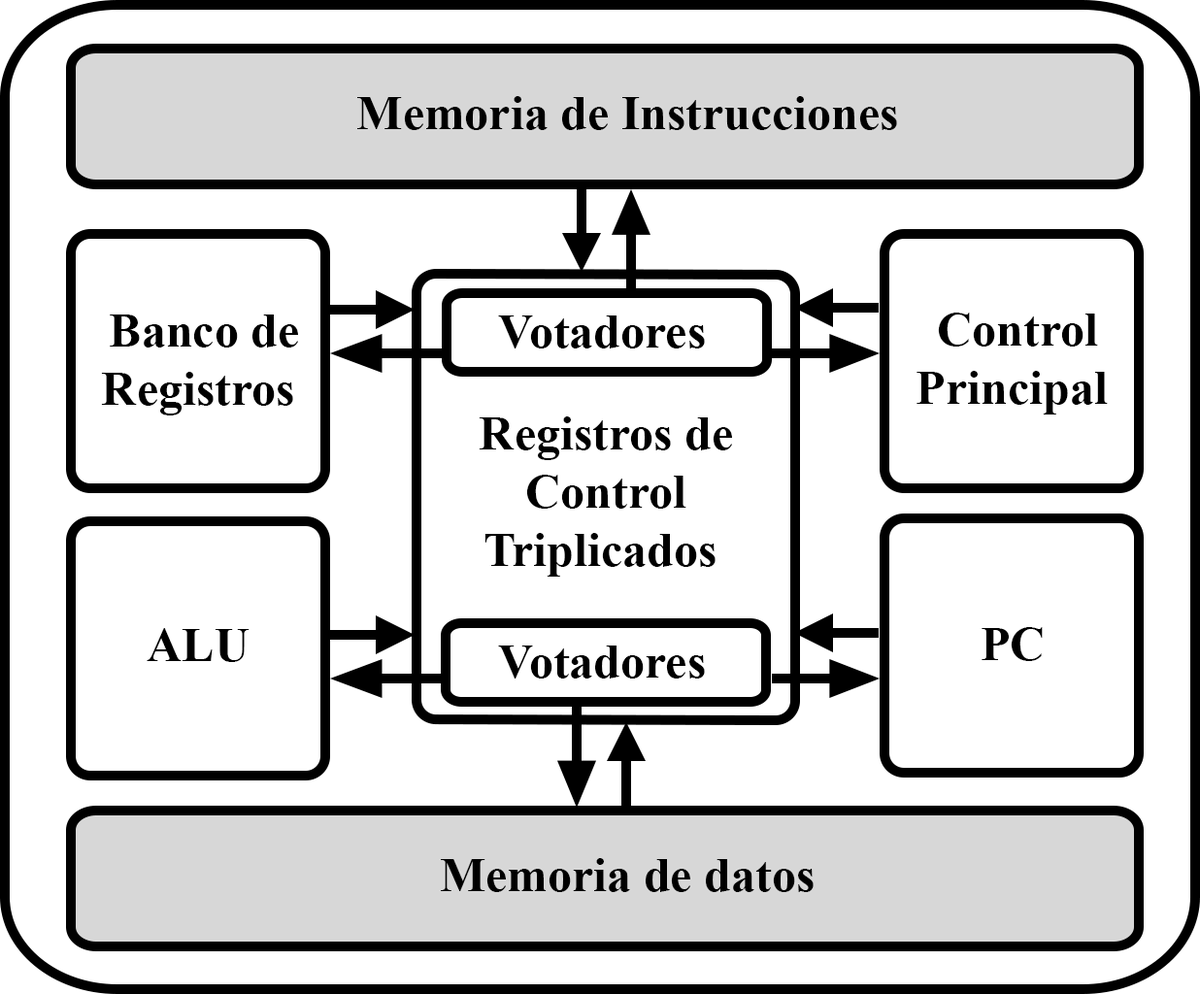
<style>
.page{position:relative;width:1200px;height:994px;background:#ffffff}
.page>*{position:absolute;margin:0}
.t1{font:48.5px "TimesNewRomanPS-BoldMT";color:#000000}
.t2{font:48.6px "TimesNewRomanPS-BoldMT";color:#000000}
</style>
<div class="page">
<p class="t1" style="left:357px;top:96px;width:540px;height:34px">Memoria de Instrucciones</p>
<p class="t1" style="left:101px;top:314px;width:197px;height:101px;text-align:center">Banco de <br>Registros</p>
<p class="t1" style="left:498px;top:315px;width:207px;height:33px">Votadores</p>
<p class="t1" style="left:916px;top:313px;width:191px;height:101px;text-align:center">Control <br>Principal</p>
<p class="t2" style="left:479px;top:416px;width:253px;height:161px;text-align:center">Registros de <br>Control <br>Triplicados</p>
<p class="t1" style="left:147px;top:628px;width:102px;height:34px">ALU</p>
<p class="t1" style="left:981px;top:627px;width:61px;height:34px">PC</p>
<p class="t1" style="left:498px;top:645px;width:207px;height:33px">Votadores</p>
<p class="t1" style="left:441px;top:858px;width:372px;height:34px">Memoria de datos</p>
</div>
